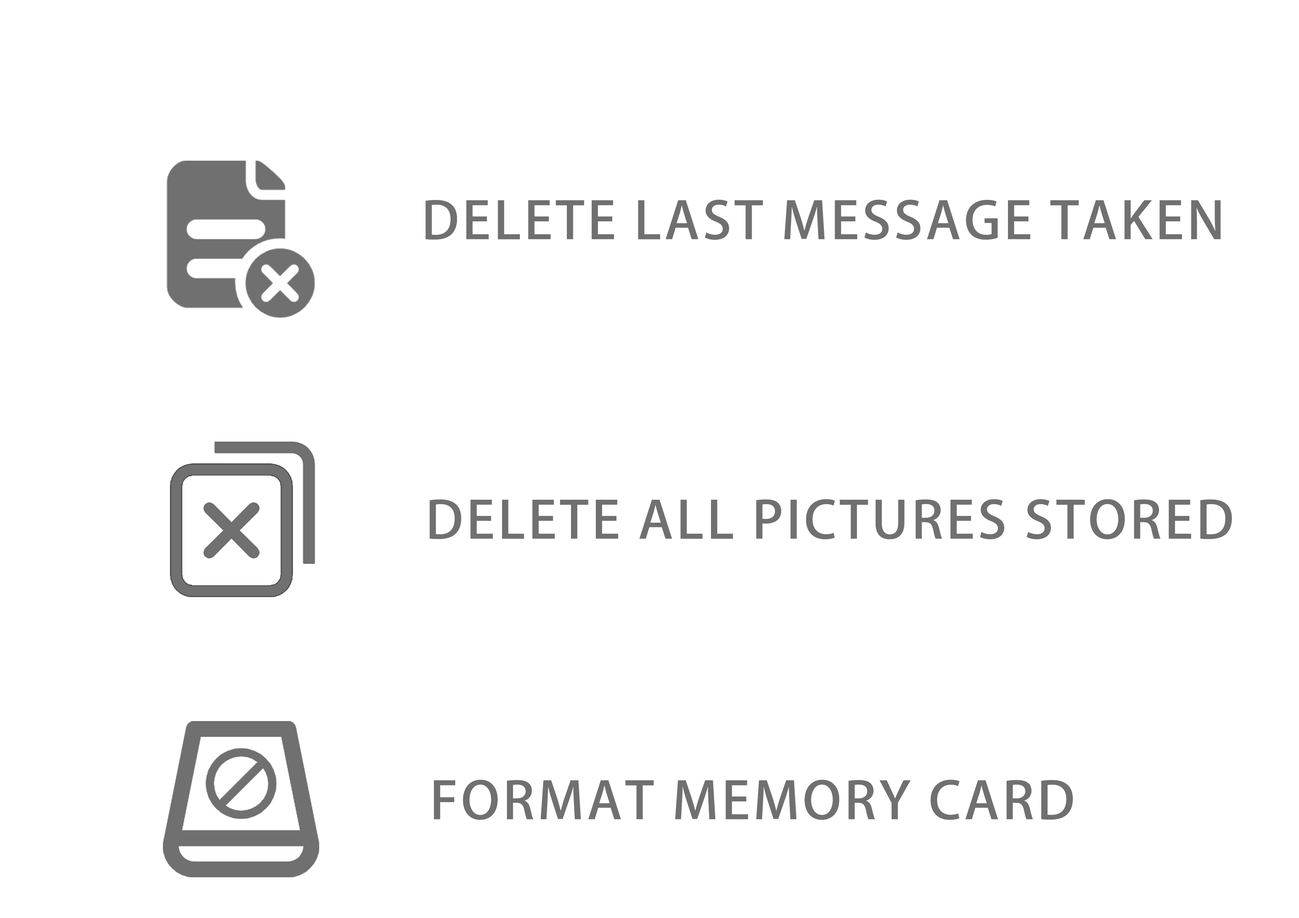
<style>
.page{position:relative;width:1299px;height:918px;background:#ffffff}
.page>*{position:absolute;margin:0}
.t1{font:50.9px "AdobeHeitiStd-Regular";letter-spacing:0.055em;color:#707070;text-transform:uppercase;scale:1.05 1}
</style>
<div class="page">
<p class="t1" style="left:425px;top:200px;width:796px;height:40px">Delete last message taken</p>
<p class="t1" style="left:429px;top:499px;width:803px;height:40px">Delete all pictures stored</p>
<p class="t1" style="left:434px;top:780px;width:639px;height:40px">Format memory card</p>
</div>
